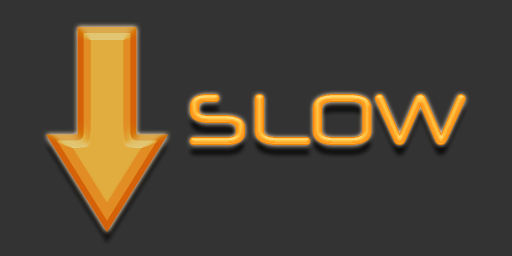
<style>
.page{position:relative;width:512px;height:256px;background:#333333}
.page>*{position:absolute;margin:0}
.t1{font:70px "NeuropolXFree";text-transform:uppercase}
</style>
<div class="page">
<p class="t1" style="left:190px;top:95px;width:275px;height:49px">SLOW</p>
</div>
